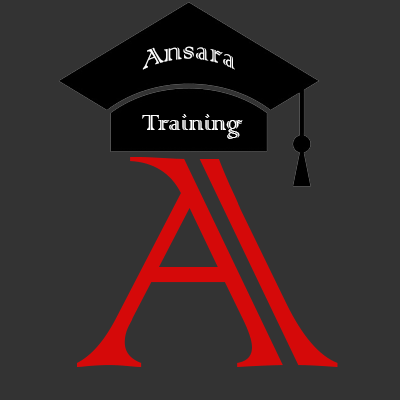
<style>
.page{position:relative;width:400px;height:400px;background:#333333}
.page>*{position:absolute;margin:0}
.t1{font:33.3px "ColonnaMT";color:#ffffff}
.t2{font:27.8px "ColonnaMT";color:#ffffff}
.t3{font:400px "ColonnaMT";color:#d50909}
</style>
<div class="page">
<p class="t1" style="left:142px;top:46px;width:93px;height:24px">Ansara</p>
<p class="t2" style="left:142px;top:114px;width:101px;height:25px">Training</p>
<p class="t3" style="left:77px;top:157px;width:261px;height:210px">A</p>
</div>
